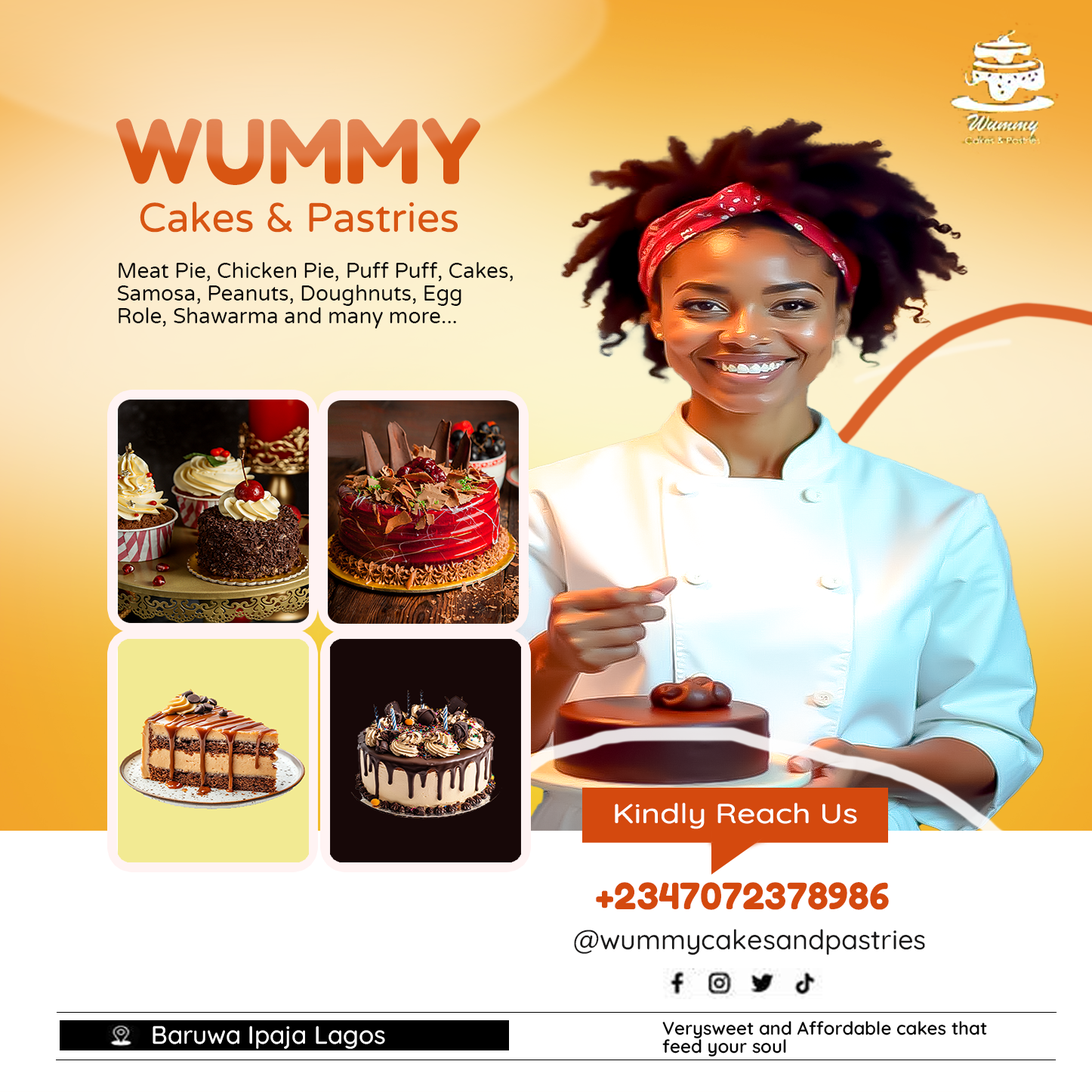
<style>
.page{position:relative;width:1092px;height:1092px;background:#ffffff}
.page>*{position:absolute;margin:0}
.t1{font:88.4px "FredokaOne-Regular"}
.t2{font:40.8px "VarelaRound-Regular";color:#d85512}
.t3{font:21.1px/22.7px "VarelaRound-Regular";color:#0b0a0a}
.t4{font:27.2px "Quicksand-Medium";color:#ffffff;scale:1.19 1}
.t5{font:36.2px "FredokaOne-Regular";color:#d4490e}
.t6{font:27.2px "Quicksand-Medium";color:#191818}
.t7{font:24.9px "Quicksand-Medium";color:#ffffff}
.t8{font:18.1px/18.1px "Quicksand-SemiBold";color:#000000}
</style>
<div class="page">
<p class="t1" style="left:116px;top:118px;width:364px;height:67px">WUMMY</p>
<p class="t2" style="left:140px;top:201px;width:318px;height:32px">Cakes &amp; Pastries</p>
<p class="t3" style="left:117px;top:262px;width:396px;height:67px">Meat Pie, Chicken Pie, Puff Puff, Cakes, Samosa, Peanuts, Doughnuts, Egg Role, Shawarma and many more...</p>
<p class="t4" style="left:615px;top:803px;width:242px;height:26px">Kindly Reach Us</p>
<p class="t5" style="left:596px;top:882px;width:293px;height:28px">+2347072378986</p>
<p class="t6" style="left:574px;top:929px;width:351px;height:26px">@wummycakesandpastries</p>
<p class="t7" style="left:153px;top:1026px;width:232px;height:23px">Baruwa Ipaja Lagos</p>
<p class="t8" style="left:662px;top:1021px;width:325px;height:35px">Verysweet and Affordable cakes that feed your soul</p>
</div>
